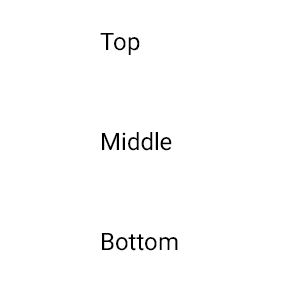
<style>
.page{position:relative;width:300px;height:300px;background:#ffffff}
.page>*{position:absolute;margin:0}
.t1{font:24px "Roboto-Regular";color:#000000}
</style>
<div class="page">
<p class="t1" style="left:100px;top:33px;width:40px;height:22px">Top</p>
<p class="t1" style="left:102px;top:132px;width:70px;height:19px">Middle</p>
<p class="t1" style="left:102px;top:233px;width:76px;height:18px">Bottom</p>
</div>
